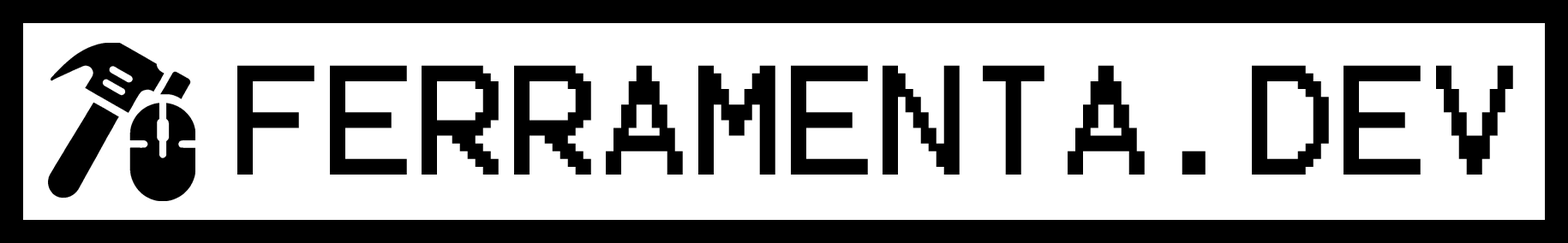
<style>
.page{position:relative;width:1568px;height:243px;background:#ffffff}
.page>*{position:absolute;margin:0}
.t1{font:124.6px "Terminal";color:#000000}
</style>
<div class="page">
<p class="t1" style="left:237px;top:65px;width:1276px;height:110px">FERRAMENTA.DEV</p>
</div>
